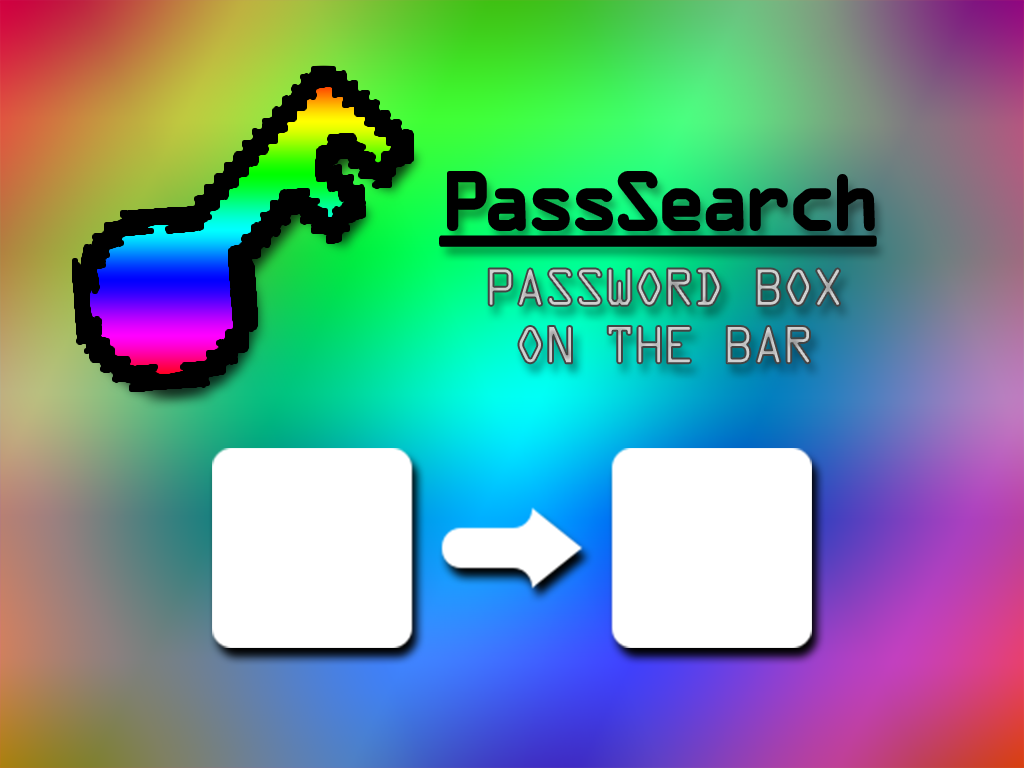
<style>
.page{position:relative;width:1024px;height:768px}
.page>*{position:absolute;margin:0}
.t1{font:72px "OCRAStd";letter-spacing:-0.1em;color:#000000;text-decoration:underline}
.t2{font:48px "OCRAStd";letter-spacing:-0.1em;text-transform:uppercase}
</style>
<div class="page">
<p class="t1" style="left:441px;top:173px;width:434px;height:72px">PassSearch</p>
<p class="t2" style="left:488px;top:268px;width:352px;height:96px;text-align:center">Password Box<br> on the bar</p>
</div>
